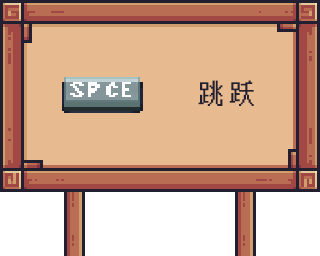
<style>
.page{position:relative;width:320px;height:256px;background:#e7bb8f}
.page>*{position:absolute;margin:0}
.t1{font:25px "FZXS16--GB1-0";letter-spacing:0.22em;color:#211f30;font-weight:bold}
</style>
<div class="page">
<p class="t1" style="left:198px;top:80px;width:56px;height:26px">跳跃</p>
</div>
